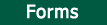
<style>
.page{position:relative;width:107px;height:25px;background:#005941}
.page>*{position:absolute;margin:0}
.t1{font:18px "Tahoma";letter-spacing:0.02em;color:#ffffff;font-weight:bold}
</style>
<div class="page">
<p class="t1" style="left:27px;top:4px;width:52px;height:15px">Forms</p>
</div>
